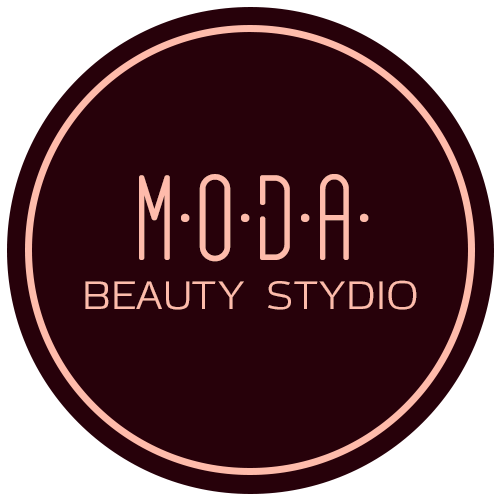
<style>
.page{position:relative;width:500px;height:500px;background:#27010a}
.page>*{position:absolute;margin:0}
.t1{font:121px "GOGOIA-Regular";color:#febbab}
.t2{font:121px "GOGOIA-Deco";color:#febbab}
.t3{font:43px "AzoftSans";color:#febbab;text-transform:uppercase}
</style>
<div class="page">
<p class="t1" style="left:139px;top:174px;width:230px;height:88px">M.O.<span class="t2">D</span>.A.</p>
<p class="t3" style="left:85px;top:280px;width:332px;height:30px">Beauty Stydio</p>
</div>
